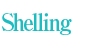
<style>
.page{position:relative;width:97px;height:43px;background:#ffffff}
.page>*{position:absolute;margin:0}
.t1{font:24px "RyuminPro-ExBold";letter-spacing:-0.08em;color:#1dbcc0;scale:0.9 1}
</style>
<div class="page">
<p class="t1" style="left:1px;top:13px;width:71px;height:22px">Shelling</p>
</div>
